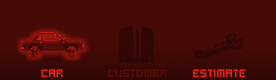
<style>
.page{position:relative;width:276px;height:80px;background:#460a07}
.page>*{position:absolute;margin:0}
.t1{font:12px "hooge05_55Cyr2";color:#ea2317}
.t2{font:12px "hooge05_55Cyr2";color:#5a0d09}
</style>
<div class="page">
<p class="t1" style="left:41px;top:69px;width:22px;height:8px">car</p>
<p class="t1" style="left:41px;top:69px;width:22px;height:8px">car</p>
<p class="t2" style="left:108px;top:69px;width:59px;height:8px">customer</p>
<p class="t1" style="left:193px;top:69px;width:53px;height:8px">estimate</p>
<p class="t1" style="left:193px;top:69px;width:53px;height:8px">estimate</p>
</div>
